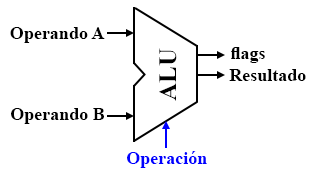
<style>
.page{position:relative;width:318px;height:173px;background:#ffffff}
.page>*{position:absolute;margin:0}
.t1{font:18px "TimesNewRomanPS-BoldMT";color:#000000}
.t2{font:25px "TimesNewRomanPS-BoldMT";color:#000000}
.t3{font:18px "TimesNewRomanPS-BoldMT";color:#0000ff}
</style>
<div class="page">
<p class="t1" style="left:10px;top:27px;width:95px;height:16px">Operando A</p>
<p class="t2" style="left:159px;top:48px;width:18px;height:53px;rotate:-90deg">ALU</p>
<p class="t1" style="left:231px;top:47px;width:34px;height:16px">flags</p>
<p class="t1" style="left:229px;top:69px;width:77px;height:12px">Resultado</p>
<p class="t1" style="left:11px;top:108px;width:93px;height:16px">Operando B</p>
<p class="t3" style="left:127px;top:151px;width:80px;height:17px">Operación</p>
</div>
